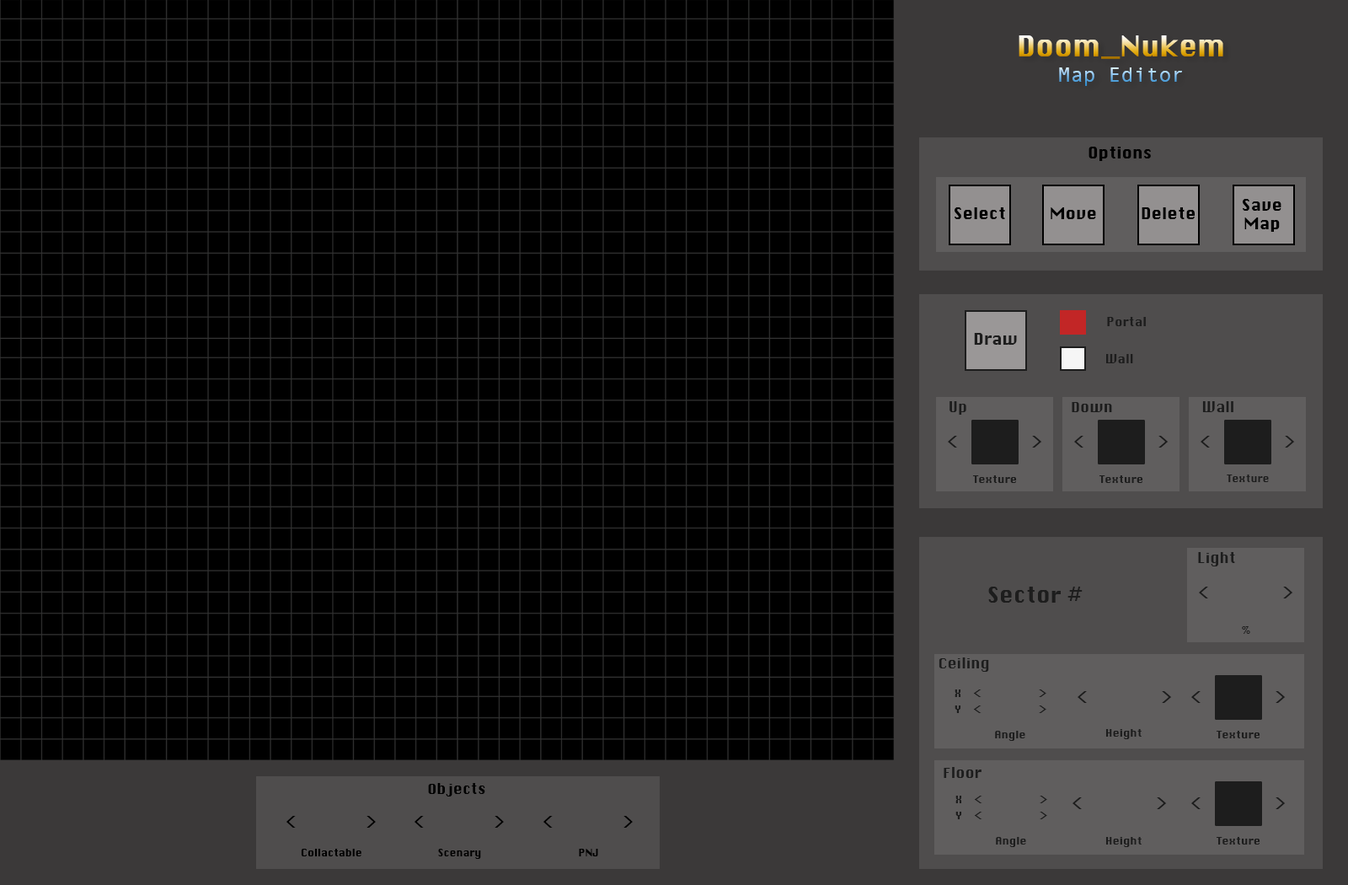
<style>
.page{position:relative;width:1348px;height:885px;background:#000000}
.page>*{position:absolute;margin:0}
.t1{font:28.1px "Silom"}
.t2{font:21.1px "AndaleMono"}
.t3{font:15.8px "Silom";color:#000000}
.t4{font:12.3px "Silom";color:#1d1d1d}
.t5{font:15.8px "Silom";color:#1d1d1d}
.t6{font:14px "Silom";color:#1d1d1d}
.t7{font:19.9px "Silom";color:#1d1d1d}
.t8{font:10.5px "Silom";color:#1d1d1d}
.t9{font:10px "Silom";color:#1d1d1d}
.t10{font:21.1px "Silom";color:#1d1d1d}
.t11{font:12.8px "Silom";color:#1d1d1d;scale:1.24 1}
.t12{font:14px "Silom";color:#000000}
.t13{font:20px "Silom";color:#000000}
.t14{font:10.6px "Silom";color:#000000;scale:0.95 1}
</style>
<div class="page">
<p class="t1" style="left:1019px;top:35px;width:204px;height:51px;text-align:center">Doom_Nukem<br><span class="t2">Map Editor</span></p>
<p class="t3" style="left:1088px;top:147px;width:63px;height:14px">Options</p>
<p class="t3" style="left:955px;top:207px;width:50px;height:12px">Select</p>
<p class="t3" style="left:1051px;top:207px;width:45px;height:12px">Move</p>
<p class="t3" style="left:1142px;top:207px;width:53px;height:12px">Delete</p>
<p class="t3" style="left:1243px;top:199px;width:38px;height:33px;text-align:center">Save<br>Map</p>
<p class="t4" style="left:1107px;top:317px;width:39px;height:9px">Portal</p>
<p class="t5" style="left:974px;top:333px;width:43px;height:12px">Draw</p>
<p class="t4" style="left:1106px;top:354px;width:27px;height:9px">Wall</p>
<p class="t6" style="left:949px;top:401px;width:17px;height:14px">Up</p>
<p class="t6" style="left:1072px;top:402px;width:40px;height:10px">Down</p>
<p class="t6" style="left:1202px;top:401px;width:31px;height:11px">Wall</p>
<p class="t7" style="left:948px;top:436px;width:9px;height:11px">&lt;</p>
<p class="t7" style="left:1032px;top:436px;width:10px;height:11px">&gt;</p>
<p class="t7" style="left:1074px;top:436px;width:9px;height:11px">&lt;</p>
<p class="t7" style="left:1158px;top:436px;width:11px;height:11px">&gt;</p>
<p class="t7" style="left:1201px;top:436px;width:9px;height:11px">&lt;</p>
<p class="t7" style="left:1285px;top:436px;width:10px;height:11px">&gt;</p>
<p class="t8" style="left:972px;top:475px;width:45px;height:8px">Texture</p>
<p class="t8" style="left:1099px;top:475px;width:44px;height:8px">Texture</p>
<p class="t9" style="left:1227px;top:474px;width:42px;height:8px">Texture</p>
<p class="t6" style="left:1198px;top:552px;width:37px;height:14px">Light</p>
<p class="t10" style="left:988px;top:586px;width:95px;height:16px">Sector #</p>
<p class="t7" style="left:1199px;top:586px;width:9px;height:12px">&lt;</p>
<p class="t7" style="left:1283px;top:586px;width:10px;height:12px">&gt;</p>
<p class="t8" style="left:1242px;top:626px;width:8px;height:8px">%</p>
<p class="t6" style="left:939px;top:657px;width:50px;height:14px">Ceiling</p>
<p class="t8" style="left:955px;top:689px;width:6px;height:8px">X</p>
<p class="t11" style="left:973px;top:689px;width:8px;height:8px">&lt;</p>
<p class="t11" style="left:1039px;top:689px;width:7px;height:8px">&gt;</p>
<p class="t7" style="left:1078px;top:691px;width:9px;height:12px">&lt;</p>
<p class="t7" style="left:1162px;top:691px;width:10px;height:12px">&gt;</p>
<p class="t7" style="left:1191px;top:691px;width:10px;height:12px">&lt;</p>
<p class="t7" style="left:1276px;top:691px;width:10px;height:12px">&gt;</p>
<p class="t8" style="left:955px;top:705px;width:6px;height:8px">Y</p>
<p class="t11" style="left:973px;top:705px;width:8px;height:8px">&lt;</p>
<p class="t11" style="left:1039px;top:705px;width:7px;height:8px">&gt;</p>
<p class="t8" style="left:995px;top:730px;width:30px;height:11px">Angle</p>
<p class="t8" style="left:1105px;top:729px;width:37px;height:10px">Height</p>
<p class="t8" style="left:1216px;top:730px;width:44px;height:8px">Texture</p>
<p class="t6" style="left:944px;top:767px;width:37px;height:11px">Floor</p>
<p class="t12" style="left:428px;top:783px;width:57px;height:13px">Objects</p>
<p class="t8" style="left:955px;top:795px;width:7px;height:8px">X</p>
<p class="t11" style="left:974px;top:795px;width:8px;height:8px">&lt;</p>
<p class="t11" style="left:1040px;top:795px;width:7px;height:8px">&gt;</p>
<p class="t7" style="left:1072px;top:797px;width:10px;height:12px">&lt;</p>
<p class="t7" style="left:1157px;top:797px;width:10px;height:12px">&gt;</p>
<p class="t7" style="left:1191px;top:797px;width:10px;height:12px">&lt;</p>
<p class="t7" style="left:1276px;top:797px;width:10px;height:12px">&gt;</p>
<p class="t13" style="left:286px;top:816px;width:10px;height:11px">&lt;</p>
<p class="t13" style="left:366px;top:816px;width:10px;height:11px">&gt;</p>
<p class="t13" style="left:415px;top:816px;width:9px;height:11px">&lt;</p>
<p class="t13" style="left:495px;top:816px;width:9px;height:11px">&gt;</p>
<p class="t13" style="left:543px;top:816px;width:10px;height:11px">&lt;</p>
<p class="t13" style="left:623px;top:816px;width:10px;height:11px">&gt;</p>
<p class="t8" style="left:955px;top:811px;width:7px;height:8px">Y</p>
<p class="t11" style="left:974px;top:811px;width:8px;height:8px">&lt;</p>
<p class="t11" style="left:1040px;top:811px;width:7px;height:8px">&gt;</p>
<p class="t8" style="left:996px;top:837px;width:30px;height:10px">Angle</p>
<p class="t8" style="left:1105px;top:837px;width:37px;height:10px">Height</p>
<p class="t8" style="left:1216px;top:837px;width:44px;height:7px">Texture</p>
<p class="t14" style="left:301px;top:848px;width:60px;height:8px">Collactable</p>
<p class="t14" style="left:438px;top:848px;width:43px;height:10px">Scenary</p>
<p class="t14" style="left:579px;top:848px;width:19px;height:8px">PNJ</p>
</div>
